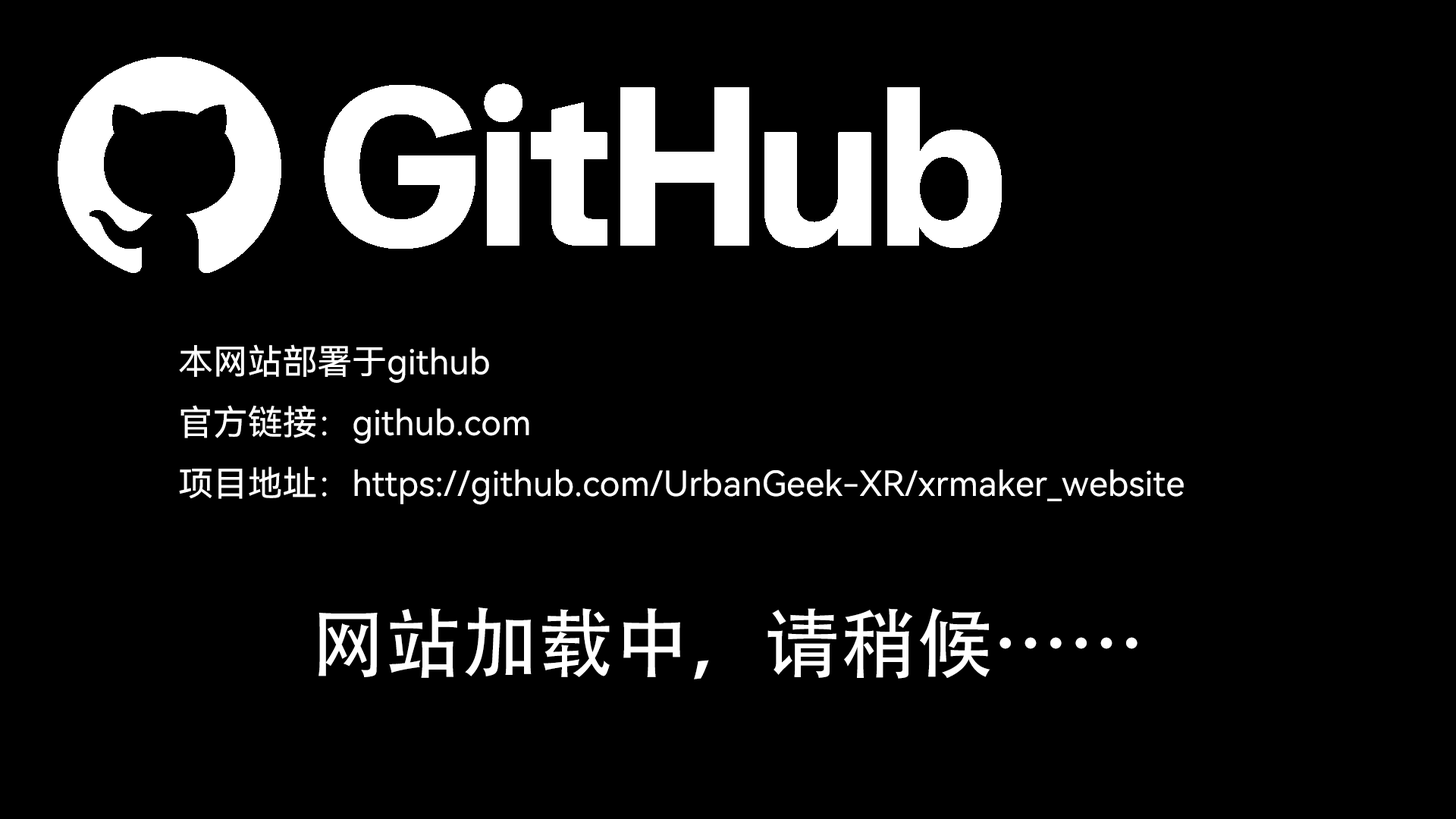
<style>
.page{position:relative;width:1456px;height:819px;background:#000000}
.page>*{position:absolute;margin:0}
.t1{font:34.8px "HarmonyOS_Sans_SC";color:#ffffff}
.t2{font:75.8px "AdobeHeitiStd-Regular";color:#ffffff}
</style>
<div class="page">
<p class="t1" style="left:179px;top:344px;width:1005px;height:161px">本网站部署于github<br>官方链接：github.com<br>项目地址：https://github.com/UrbanGeek-XR/xrmaker_website</p>
<p class="t2" style="left:318px;top:607px;width:819px;height:72px">网站加载中，请稍候……</p>
</div>
